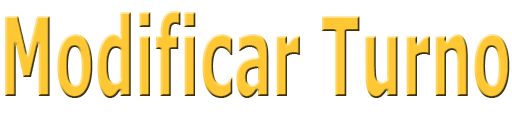
<style>
.page{position:relative;width:512px;height:128px;background:#ffffff}
.page>*{position:absolute;margin:0}
.t1{font:109.7px "Verdana-Bold";color:#fec835;scale:0.53 1}
</style>
<div class="page">
<p class="t1" style="left:5px;top:11px;width:505px;height:87px">Modificar Turno</p>
</div>
